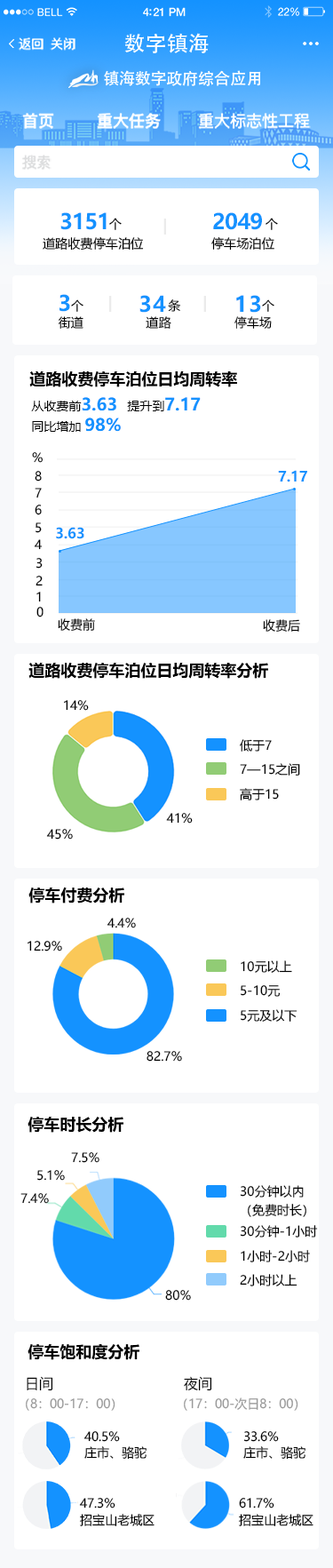
<style>
.page{position:relative;width:333px;height:1568px;background:#ffffff}
.page>*{position:absolute;margin:0}
.t1{font:12.4px "PingFangSC-Regular";color:#ffffff}
.t2{font:21.3px "AdobeHeitiStd-Regular";color:#ffffff}
.t3{font:16px "AdobeHeitiStd-Regular";color:#ffffff}
.t4{font:16px "PingFangSC-Medium";color:#ffffff}
.t5{font:16px "PingFangSC-Regular";color:#ffffff}
.t6{font:14.2px "PingFangSC-Regular";color:#dcddde}
.t7{font:21.3px "MicrosoftYaHei-Bold";color:#1492ff}
.t8{font:12.4px "MicrosoftYaHei";color:#000000}
.t9{font:16px "MicrosoftYaHei-Bold";color:#000000}
.t10{font:12.4px/21px "MicrosoftYaHei";color:#000000}
.t11{font:16.8px/21px "MicrosoftYaHei-Bold";color:#1492ff}
.t12{font:14.2px "MicrosoftYaHei-Bold";color:#1492ff}
.t13{font:12.4px/18.5px "MicrosoftYaHei";color:#000000}
.t14{font:14.2px "MicrosoftYaHei";color:#000000}
.t15{font:12.4px "MicrosoftYaHei";color:#999999}
</style>
<div class="page">
<p class="t1" style="left:18px;top:37px;width:26px;height:14px">返回</p>
<p class="t1" style="left:50px;top:37px;width:26px;height:14px">关闭</p>
<p class="t2" style="left:124px;top:33px;width:85px;height:21px">数字镇海</p>
<p class="t3" style="left:104px;top:70px;width:157px;height:16px">镇海数字政府综合应用</p>
<p class="t4" style="left:21px;top:112px;width:290px;height:17px">首页        重大任务<span class="t5">       重大标志性工程</span></p>
<p class="t6" style="left:22px;top:155px;width:30px;height:15px">搜索</p>
<p class="t7" style="left:60px;top:212px;width:47px;height:18px">3151</p>
<p class="t8" style="left:109px;top:218px;width:13px;height:12px">个</p>
<p class="t7" style="left:213px;top:212px;width:49px;height:18px">2049</p>
<p class="t8" style="left:266px;top:218px;width:12px;height:12px">个</p>
<p class="t8" style="left:43px;top:237px;width:101px;height:14px">道路收费停车泊位</p>
<p class="t8" style="left:211px;top:237px;width:64px;height:14px">停车场泊位</p>
<p class="t7" style="left:60px;top:294px;width:10px;height:18px">3</p>
<p class="t8" style="left:71px;top:299px;width:13px;height:13px">个</p>
<p class="t7" style="left:139px;top:295px;width:27px;height:18px">34</p>
<p class="t8" style="left:168px;top:299px;width:12px;height:13px">条</p>
<p class="t7" style="left:236px;top:295px;width:25px;height:18px">13</p>
<p class="t8" style="left:262px;top:299px;width:13px;height:13px">个</p>
<p class="t8" style="left:59px;top:316px;width:25px;height:13px">街道</p>
<p class="t8" style="left:146px;top:316px;width:25px;height:13px">道路</p>
<p class="t8" style="left:235px;top:316px;width:37px;height:13px">停车场</p>
<p class="t9" style="left:29px;top:371px;width:208px;height:16px">道路收费停车泊位日均周转率</p>
<p class="t10" style="left:31px;top:397px;width:170px;height:35px;text-align:justify">从收费前<span class="t11">3.63  </span>提升到<span class="t11">7.17<br></span>同比增加 <span class="t11">98%</span></p>
<p class="t8" style="left:32px;top:452px;width:12px;height:11px">%</p>
<p class="t8" style="left:35px;top:471px;width:7px;height:11px">8</p>
<p class="t12" style="left:278px;top:470px;width:29px;height:12px">7.17</p>
<p class="t8" style="left:35px;top:488px;width:7px;height:10px">7</p>
<p class="t8" style="left:35px;top:505px;width:7px;height:10px">6</p>
<p class="t8" style="left:36px;top:522px;width:6px;height:11px">5</p>
<p class="t12" style="left:56px;top:527px;width:28px;height:12px">3.63</p>
<p class="t8" style="left:34px;top:539px;width:9px;height:11px">4</p>
<p class="t8" style="left:36px;top:558px;width:7px;height:11px">3</p>
<p class="t8" style="left:36px;top:576px;width:7px;height:10px">2</p>
<p class="t8" style="left:36px;top:592px;width:5px;height:10px">1</p>
<p class="t8" style="left:36px;top:607px;width:8px;height:10px">0</p>
<p class="t8" style="left:58px;top:618px;width:37px;height:13px">收费前</p>
<p class="t8" style="left:263px;top:619px;width:37px;height:13px">收费后</p>
<p class="t9" style="left:28px;top:663px;width:240px;height:16px">道路收费停车泊位日均周转率分析</p>
<p class="t8" style="left:64px;top:700px;width:25px;height:11px">14%</p>
<p class="t8" style="left:240px;top:739px;width:32px;height:13px">低于7</p>
<p class="t8" style="left:240px;top:763px;width:60px;height:13px">7—15之间</p>
<p class="t8" style="left:240px;top:788px;width:39px;height:12px">高于15</p>
<p class="t8" style="left:166px;top:813px;width:27px;height:11px">41%</p>
<p class="t8" style="left:46px;top:829px;width:27px;height:11px">45%</p>
<p class="t9" style="left:28px;top:887px;width:96px;height:16px">停车付费分析</p>
<p class="t8" style="left:107px;top:918px;width:29px;height:10px">4.4%</p>
<p class="t8" style="left:28px;top:941px;width:34px;height:10px">12.9%</p>
<p class="t8" style="left:241px;top:960px;width:51px;height:13px">10元以上</p>
<p class="t8" style="left:241px;top:985px;width:40px;height:12px">5-10元</p>
<p class="t8" style="left:241px;top:1009px;width:57px;height:13px">5元及以下</p>
<p class="t8" style="left:147px;top:1051px;width:35px;height:11px">82.7%</p>
<p class="t9" style="left:28px;top:1117px;width:95px;height:16px">停车时长分析</p>
<p class="t8" style="left:71px;top:1152px;width:28px;height:11px">7.5%</p>
<p class="t8" style="left:37px;top:1170px;width:28px;height:11px">5.1%</p>
<p class="t8" style="left:20px;top:1193px;width:29px;height:11px">7.4%</p>
<p class="t13" style="left:240px;top:1185px;width:66px;height:32px;text-align:justify">30分钟以内<br>（免费时长）</p>
<p class="t8" style="left:240px;top:1225px;width:78px;height:13px">30分钟-1小时</p>
<p class="t8" style="left:241px;top:1250px;width:69px;height:12px">1小时-2小时</p>
<p class="t8" style="left:240px;top:1274px;width:58px;height:12px">2小时以上</p>
<p class="t8" style="left:165px;top:1290px;width:26px;height:11px">80%</p>
<p class="t9" style="left:28px;top:1344px;width:111px;height:16px">停车饱和度分析</p>
<p class="t14" style="left:27px;top:1376px;width:26px;height:15px">日间</p>
<p class="t14" style="left:184px;top:1376px;width:28px;height:15px">夜间</p>
<p class="t15" style="left:184px;top:1397px;width:114px;height:14px">（17：00-次日8：00）</p>
<p class="t15" style="left:26px;top:1398px;width:89px;height:13px">（8：00-17：00）</p>
<p class="t8" style="left:84px;top:1431px;width:36px;height:11px">40.5%</p>
<p class="t8" style="left:243px;top:1431px;width:36px;height:11px">33.6%</p>
<p class="t8" style="left:84px;top:1446px;width:63px;height:14px">庄市、骆驼</p>
<p class="t8" style="left:243px;top:1446px;width:63px;height:14px">庄市、骆驼</p>
<p class="t8" style="left:79px;top:1498px;width:36px;height:10px">47.3%</p>
<p class="t8" style="left:239px;top:1498px;width:36px;height:10px">61.7%</p>
<p class="t8" style="left:80px;top:1514px;width:75px;height:12px">招宝山老城区</p>
<p class="t8" style="left:239px;top:1514px;width:75px;height:12px">招宝山老城区</p>
</div>
